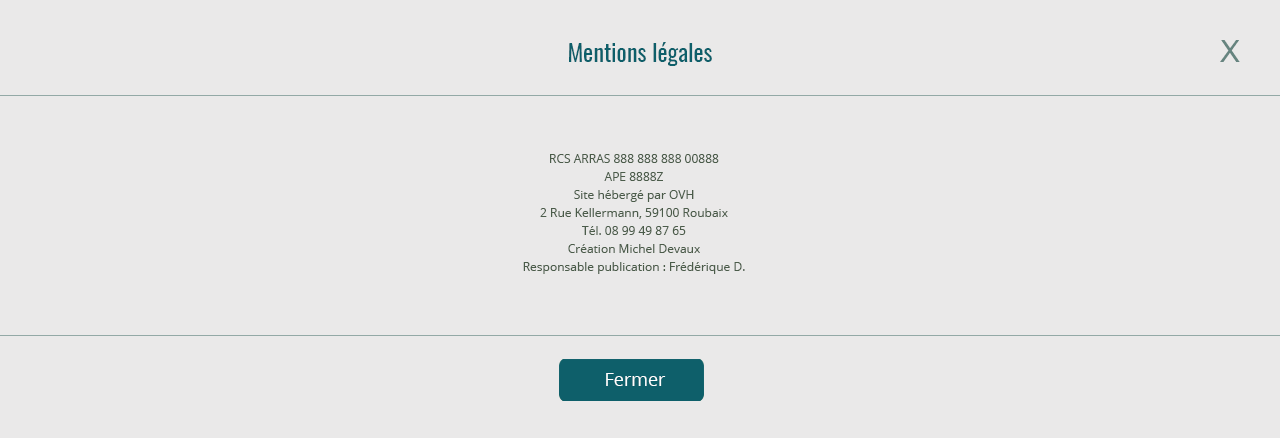
<style>
.page{position:relative;width:1280px;height:438px;background:#eae9e9}
.page>*{position:absolute;margin:0}
.t1{font:30px "ArialMT";color:#66847f}
.t2{font:24px "Oswald-Regular";color:#0e5f6a}
.t3{font:12px/18px "OpenSans";color:#4b5c4a}
.t4{font:18px "OpenSans";color:#ffffff}
</style>
<div class="page">
<p class="t1" style="left:1220px;top:40px;width:20px;height:22px">X</p>
<p class="t2" style="left:569px;top:42px;width:143px;height:24px">Mentions légales</p>
<p class="t3" style="left:523px;top:154px;width:222px;height:120px;text-align:center">RCS ARRAS 888 888 888 00888<br>APE 8888Z<br>Site hébergé par OVH<br>2 Rue Kellermann, 59100 Roubaix<br>Tél. 08 99 49 87 65<br>Création Michel Devaux<br>Responsable publication : Frédérique D.</p>
<p class="t4" style="left:606px;top:373px;width:60px;height:13px">Fermer</p>
</div>
